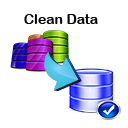
<style>
.page{position:relative;width:128px;height:128px;background:#ffffff}
.page>*{position:absolute;margin:0}
.t1{font:14px "ArialRoundedMTBold";color:#070707}
</style>
<div class="page">
<p class="t1" style="left:24px;top:14px;width:74px;height:10px">Clean Data</p>
</div>
